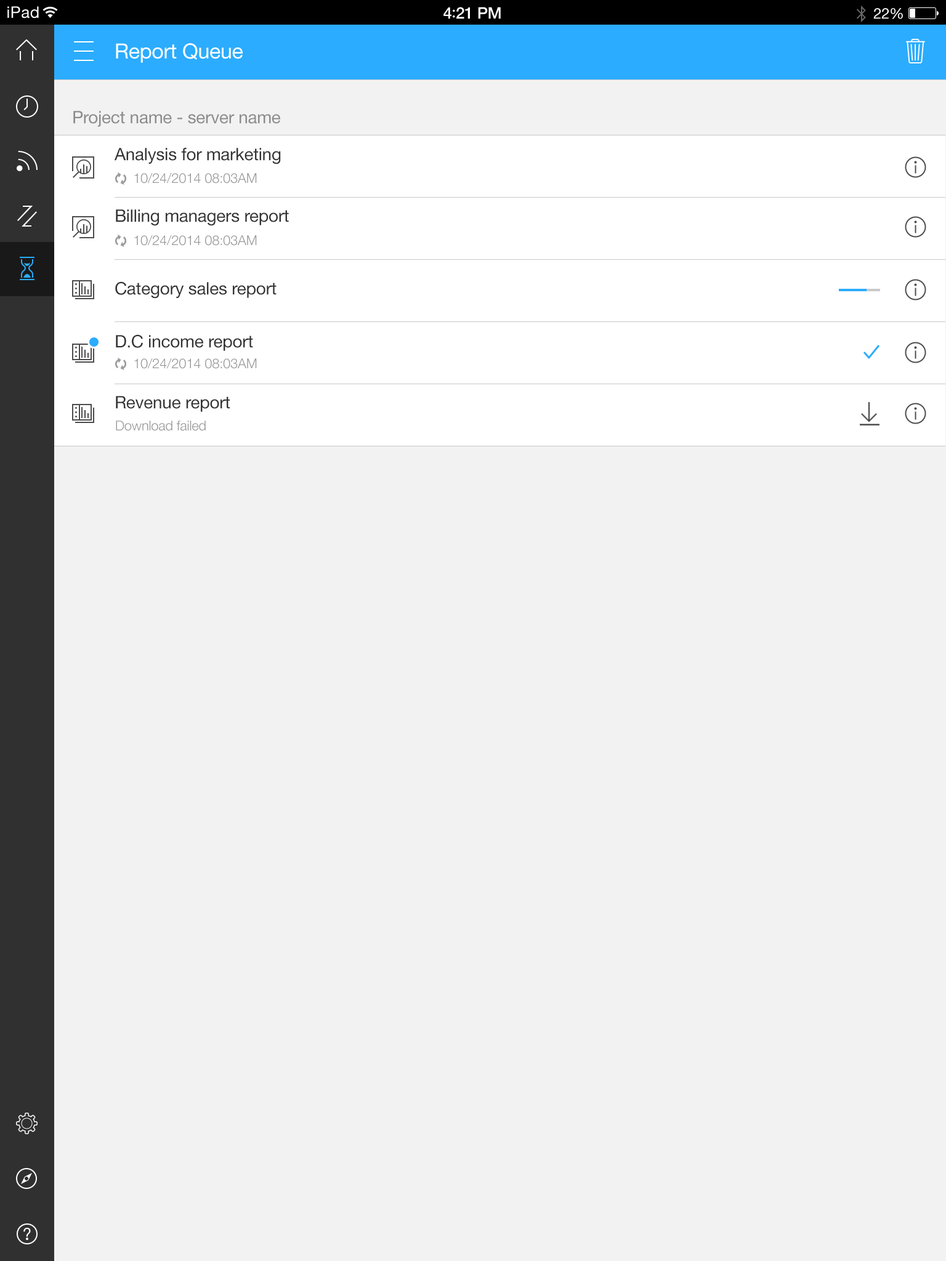
<style>
.page{position:relative;width:946px;height:1261px;background:#f2f2f2}
.page>*{position:absolute;margin:0}
.t1{font:16px "HelveticaNeue";letter-spacing:0.02em;color:#ffffff}
.t2{font:16px "HelveticaNeue-Medium";letter-spacing:-0.02em;color:#ffffff}
.t3{font:16px "Avenir-Medium";letter-spacing:-0.02em;color:#ffffff}
.t4{font:14.8px "HelveticaNeue";letter-spacing:-0.02em;color:#ffffff}
.t5{font:20.9px "HelveticaNeue";letter-spacing:-0.01em;color:#ffffff}
.t6{font:17.2px "HelveticaNeue";letter-spacing:-0.01em;color:#8c8c8c}
.t7{font:17.2px "HelveticaNeue";letter-spacing:-0.01em;color:#333333}
.t8{font:13.5px "HelveticaNeue-Light";letter-spacing:-0.01em;color:#999999}
</style>
<div class="page">
<p class="t1" style="left:7px;top:6px;width:32px;height:12px">iPad</p>
<p class="t2" style="left:443px;top:7px;width:58px;height:12px">4<span class="t3">:</span>21 PM</p>
<p class="t4" style="left:873px;top:8px;width:30px;height:11px">22%</p>
<p class="t5" style="left:116px;top:43px;width:127px;height:20px">Report Queue</p>
<p class="t6" style="left:73px;top:111px;width:207px;height:16px">Project name - server name</p>
<p class="t7" style="left:114px;top:148px;width:167px;height:16px">Analysis for marketing</p>
<p class="t8" style="left:134px;top:173px;width:123px;height:10px">10/24/2014 08:03AM</p>
<p class="t7" style="left:116px;top:209px;width:173px;height:17px">Billing managers report</p>
<p class="t8" style="left:134px;top:235px;width:123px;height:11px">10/24/2014 08:03AM</p>
<p class="t7" style="left:115px;top:281px;width:161px;height:18px">Category sales report</p>
<p class="t7" style="left:116px;top:334px;width:137px;height:17px">D.C income report</p>
<p class="t8" style="left:134px;top:358px;width:123px;height:11px">10/24/2014 08:03AM</p>
<p class="t7" style="left:116px;top:396px;width:114px;height:16px">Revenue report</p>
<p class="t8" style="left:116px;top:421px;width:90px;height:10px">Download failed</p>
</div>
